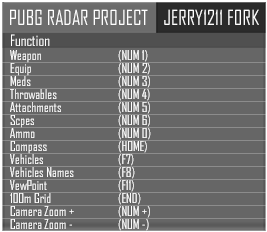
<style>
.page{position:relative;width:267px;height:232px;background:#666666}
.page>*{position:absolute;margin:0}
.t1{font:20px "AgencyFB-Reg";color:#ffffff}
.t2{font:15px "AgencyFB-Reg";color:#ffffff}
.t3{font:13px/13px "AgencyFB-Reg";color:#ffffff}
</style>
<div class="page">
<p class="t1" style="left:10px;top:9px;width:138px;height:16px">PUBG RADAR PROJECT</p>
<p class="t1" style="left:164px;top:9px;width:95px;height:16px">JERRY1211 FORK</p>
<p class="t2" style="left:11px;top:34px;width:39px;height:12px">Function</p>
<p class="t3" style="left:10px;top:50px;width:141px;height:181px">Weapon    (NUM 1)<br>Equip    (NUM 2)<br>Meds    (NUM 3)<br>Throwables  (NUM 4)<br>Attachments  (NUM 5)<br>Scpes   (NUM 6)<br>Ammo   (NUM 0)<br>Compass  (HOME) <br>Vehicles   (F7)<br>Vehicles Names  (F8)<br>VewPoint  (F11)<br>100m Grid  (END)<br>Camera Zoom +  (NUM +)<br>Camera Zoom -  (NUM -)</p>
</div>
